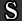
<style>
.page{position:relative;width:22px;height:21px;background:#333333}
.page>*{position:absolute;margin:0}
.t1{font:22px "RyuminPro-ExBold";letter-spacing:-0.08em;color:#ffffff;scale:0.9 1}
</style>
<div class="page">
<p class="t1" style="left:5px;top:2px;width:12px;height:17px">S</p>
</div>
